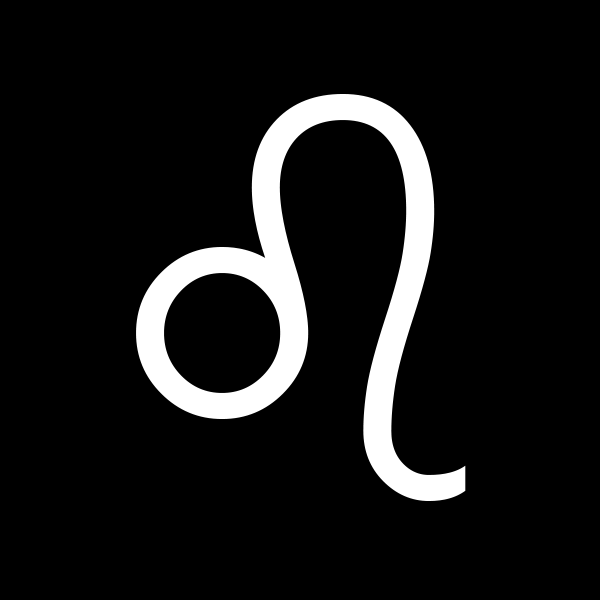
<style>
.page{position:relative;width:600px;height:600px;background:#000000}
.page>*{position:absolute;margin:0}
.t1{font:465.1px "ArialUnicodeMS";color:#ffffff}
</style>
<div class="page">
<p class="t1" style="left:136px;top:94px;width:330px;height:407px">♌︎</p>
</div>
